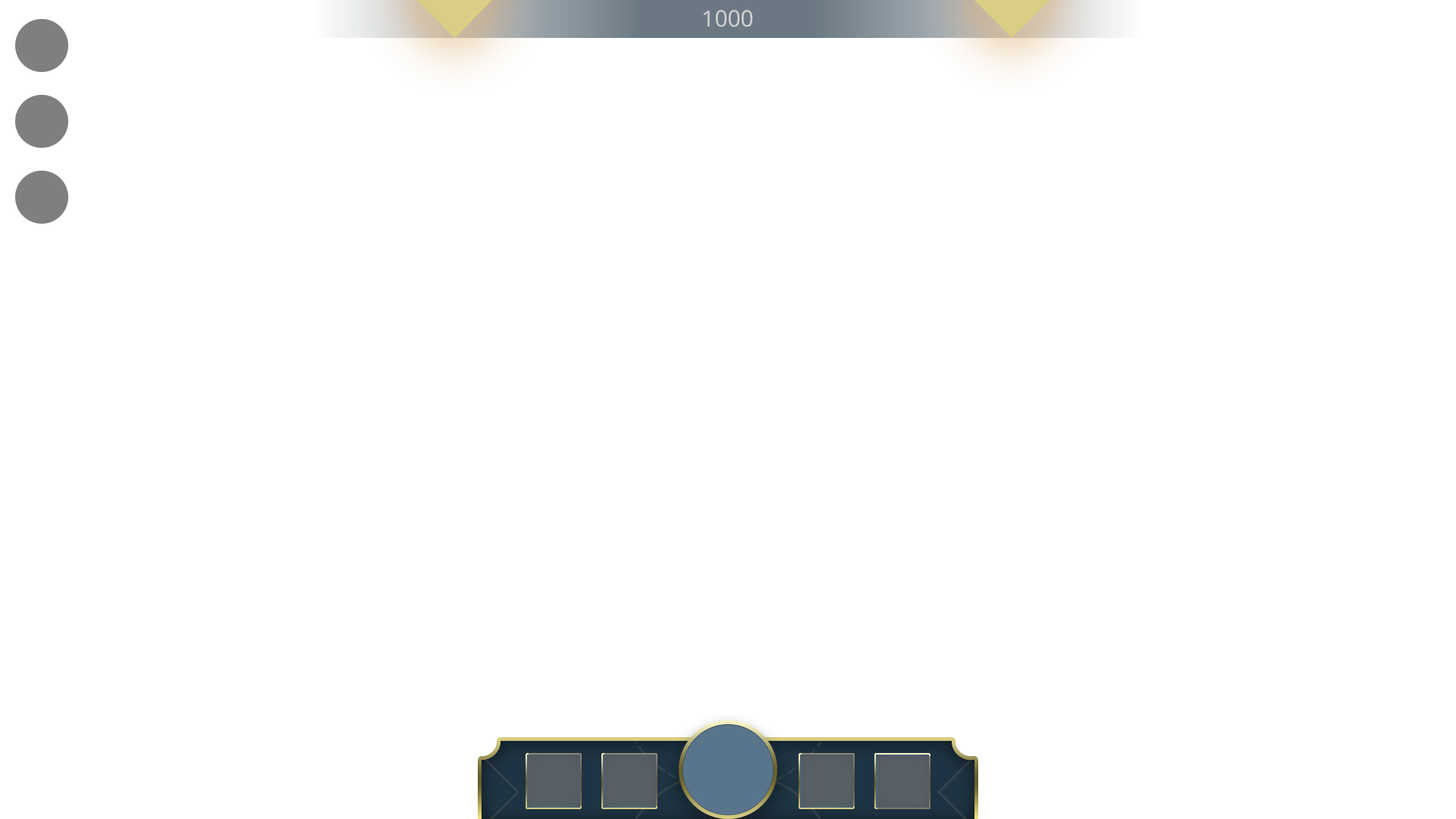
<style>
.page{position:relative;width:1456px;height:819px;background:#ffffff}
.page>*{position:absolute;margin:0}
.t1{font:22.7px "OpenSans-Regular";color:#d2d2d2}
</style>
<div class="page">
<p class="t1" style="left:703px;top:10px;width:50px;height:17px">1000</p>
</div>
